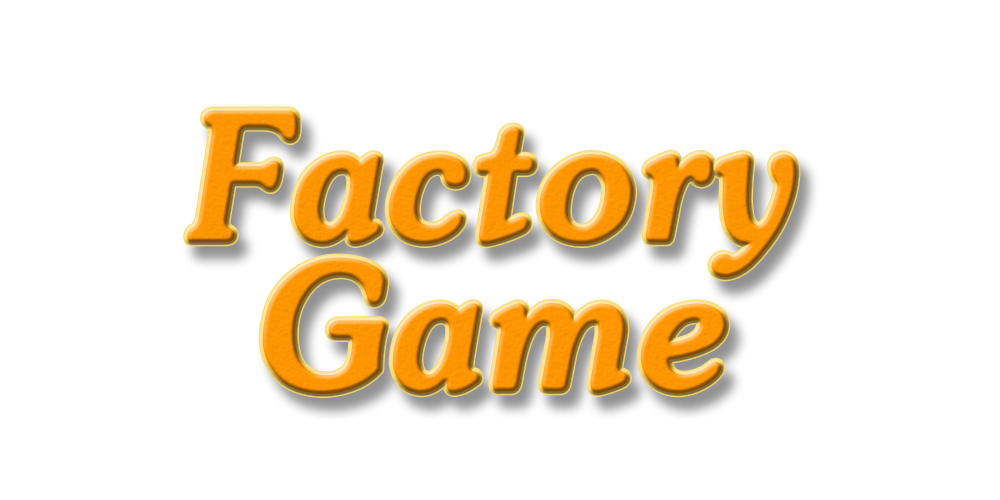
<style>
.page{position:relative;width:1000px;height:500px;background:#ffffff}
.page>*{position:absolute;margin:0}
.t1{font:172.8px/149px "HGB7X_CNKI";color:#ff9600;font-weight:bold;scale:0.93 1}
</style>
<div class="page">
<p class="t1" style="left:187px;top:110px;width:610px;height:284px;text-align:center">Factory<br>Game</p>
</div>
